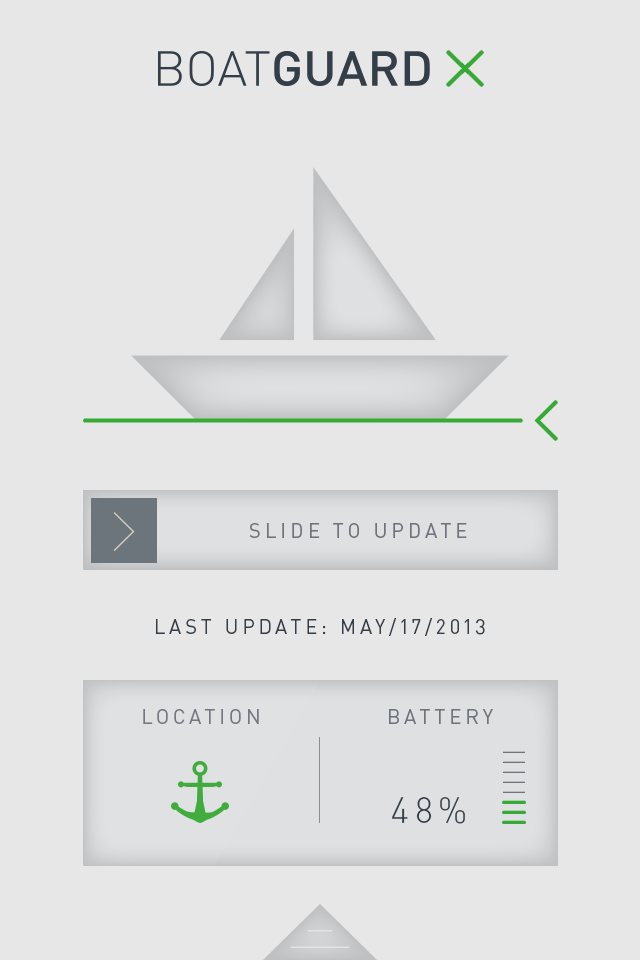
<style>
.page{position:relative;width:640px;height:960px;background:#e8e7e8}
.page>*{position:absolute;margin:0}
.t1{font:20px "DINPro";letter-spacing:0.2em;color:#6d747c}
.t2{font:20px "DINPro";letter-spacing:0.2em;color:#333e48}
.t3{font:20.3px "DINPro";letter-spacing:0.2em;color:#6d747c}
.t4{font:35.9px "DINPro-Light";letter-spacing:0.15em;color:#333e48}
</style>
<div class="page">
<p class="t1" style="left:249px;top:523px;width:218px;height:15px">SLIDE TO UPDATE</p>
<p class="t2" style="left:156px;top:618px;width:329px;height:18px">LAST UPDATE: MAY/17/2013</p>
<p class="t3" style="left:143px;top:709px;width:116px;height:15px">LOCATION</p>
<p class="t3" style="left:389px;top:709px;width:104px;height:15px">BATTERY</p>
<p class="t4" style="left:392px;top:797px;width:73px;height:27px">48%</p>
</div>
